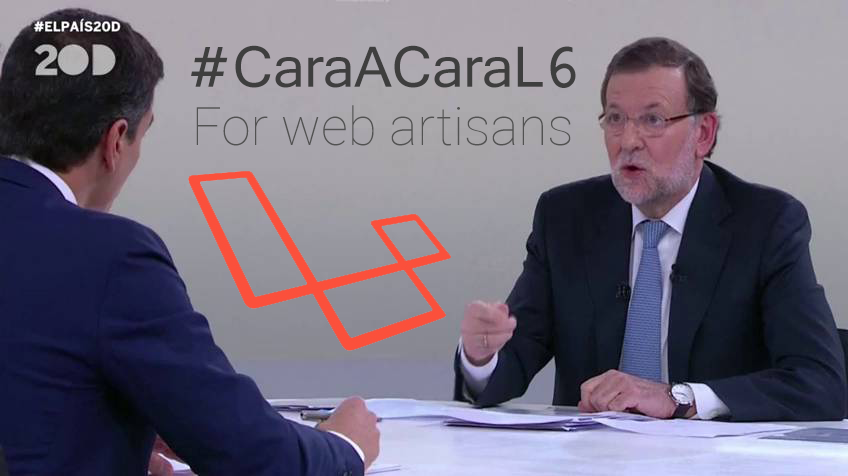
<style>
.page{position:relative;width:848px;height:476px}
.page>*{position:absolute;margin:0}
.t1{font:60.7px "Shruti";color:#3f3f3f}
.t2{font:53px "Roboto-Thin";color:#525252}
</style>
<div class="page">
<p class="t1" style="left:191px;top:45px;width:385px;height:43px">#CaraACaraL6</p>
<p class="t2" style="left:196px;top:105px;width:375px;height:41px">For web artisans</p>
</div>
